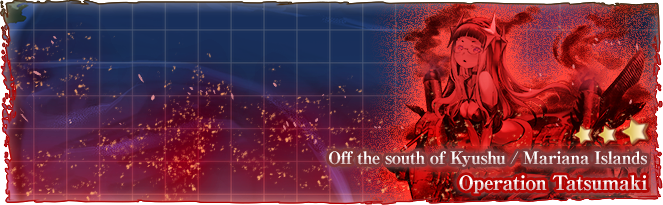
<style>
.page{position:relative;width:663px;height:205px}
.page>*{position:absolute;margin:0}
.t1{font:17px "RyuminPro-ExBold";letter-spacing:-0.04em}
.t2{font:20px "RyuminPro-ExBold";letter-spacing:-0.04em}
</style>
<div class="page">
<p class="t1" style="left:329px;top:151px;width:318px;height:16px">Off the south of Kyushu / Mariana Islands</p>
<p class="t2" style="left:459px;top:175px;width:188px;height:19px">Operation Tatsumaki</p>
</div>
